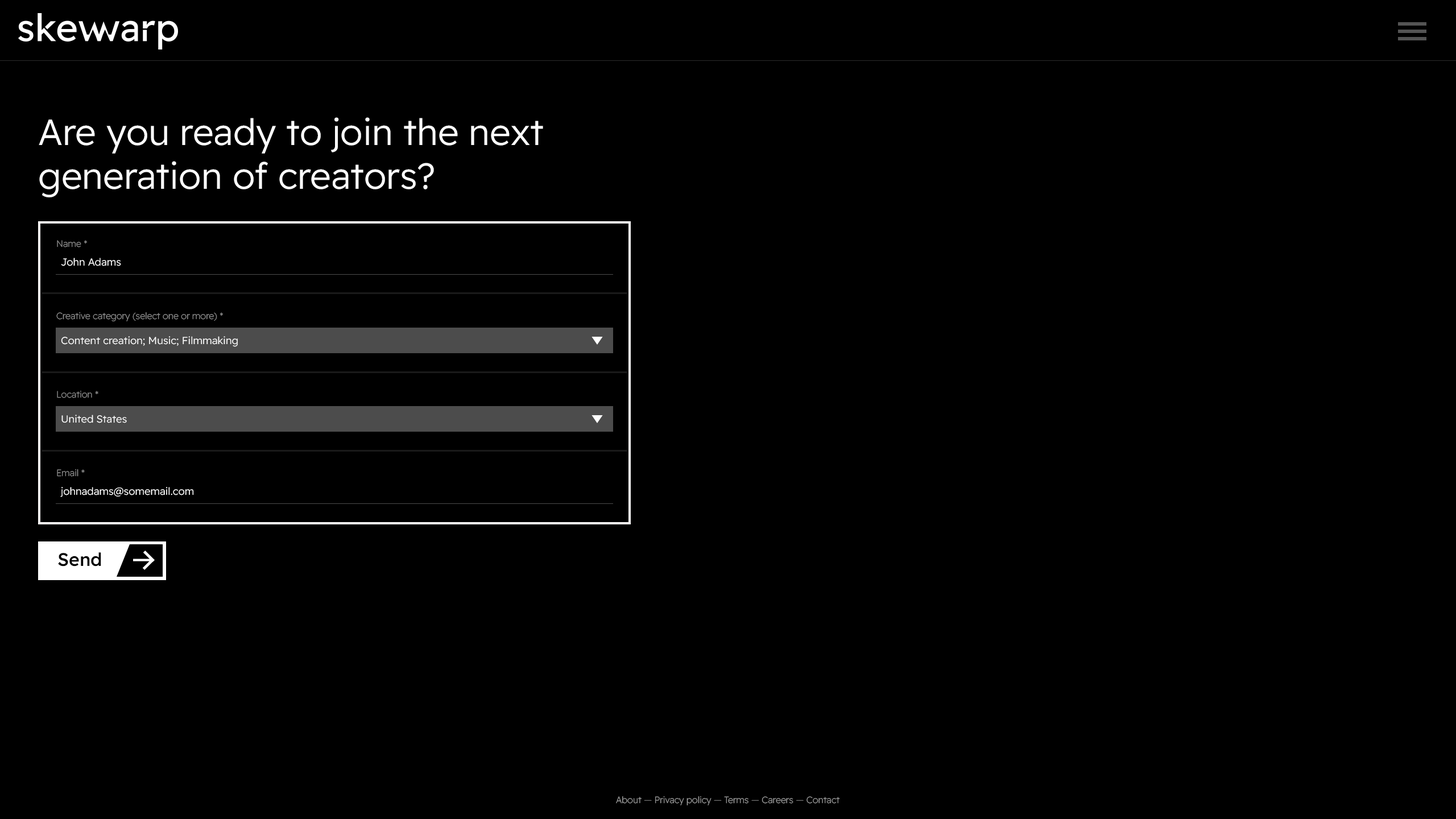
<style>
.page{position:relative;width:1456px;height:819px;background:#000000}
.page>*{position:absolute;margin:0}
.t1{font:36.4px "ReadexPro-Light";color:#ffffff}
.t2{font:9.1px "ReadexPro-ExtraLight";color:#929292}
.t3{font:10.2px "ReadexPro-Light";color:#ffffff}
.t4{font:18.2px "ReadexPro-Medium";color:#000000}
.t5{font:9.1px "ReadexPro-ExtraLight";color:#9d9d9d}
.t6{font:9.1px "ReadexPro-ExtraLight";color:#717171}
.t7{font:9.1px "ReadexPro-ExtraLight";color:#727272}
</style>
<div class="page">
<p class="t1" style="left:39px;top:117px;width:504px;height:80px">Are you ready to join the next<br>generation of creators?</p>
<p class="t2" style="left:57px;top:240px;width:30px;height:7px">Name *</p>
<p class="t3" style="left:61px;top:258px;width:60px;height:8px">John Adams</p>
<p class="t2" style="left:56px;top:312px;width:167px;height:9px">Creative category (select one or more) *</p>
<p class="t3" style="left:61px;top:336px;width:177px;height:11px">Content creation; Music; Filmmaking</p>
<p class="t2" style="left:57px;top:391px;width:41px;height:7px">Location *</p>
<p class="t3" style="left:61px;top:415px;width:66px;height:8px">United States</p>
<p class="t2" style="left:57px;top:469px;width:28px;height:8px">Email *</p>
<p class="t3" style="left:60px;top:487px;width:134px;height:10px">johnadams@somemail.com</p>
<p class="t4" style="left:58px;top:552px;width:43px;height:14px">Send</p>
<p class="t5" style="left:616px;top:796px;width:224px;height:9px">About <span class="t6">— </span>Privacy policy <span class="t7">— </span>Terms <span class="t7">— </span>Careers <span class="t7">— </span>Contact</p>
</div>
